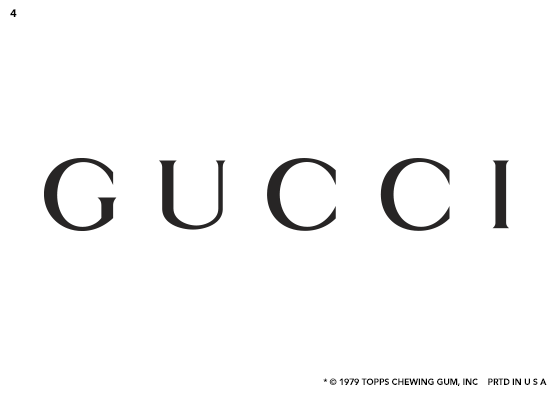
<style>
.page{position:relative;width:554px;height:394px;background:#ffffff}
.page>*{position:absolute;margin:0}
.t1{font:11.1px "Avenir-Black";letter-spacing:-0.025em;color:#000000}
.t2{font:8.9px "Avenir-Black";letter-spacing:-0.025em;color:#000000}
</style>
<div class="page">
<p class="t1" style="left:10px;top:9px;width:7px;height:8px">4</p>
<p class="t2" style="left:323px;top:378px;width:224px;height:8px">* © 1979 TOPPS CHEWING GUM, INC    PRTD IN U S A</p>
</div>
